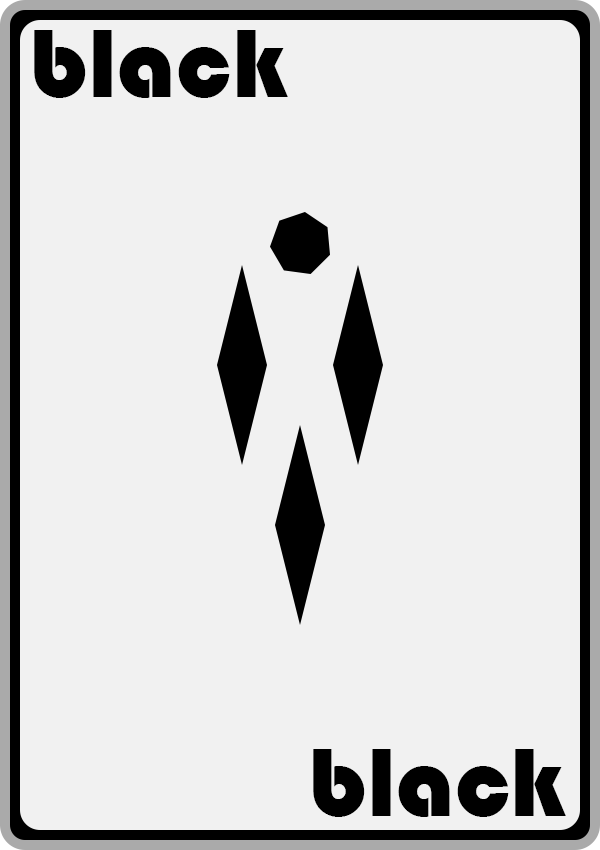
<style>
.page{position:relative;width:600px;height:850px;background:#f1f1f1}
.page>*{position:absolute;margin:0}
.t1{font:100px "Bauhaus93";color:#000000}
</style>
<div class="page">
<p class="t1" style="left:34px;top:30px;width:254px;height:68px">black</p>
<p class="t1" style="left:313px;top:749px;width:253px;height:68px">black</p>
</div>
